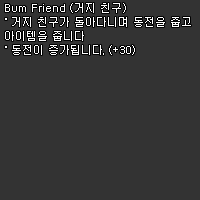
<style>
.page{position:relative;width:200px;height:200px;background:#333333}
.page>*{position:absolute;margin:0}
.t1{font:11px/14px "Dotum";color:#ffffff}
</style>
<div class="page">
<p class="t1" style="left:5px;top:3px;width:186px;height:52px">Bum Friend (거지 친구)<br>˚ 거지 친구가 돌아다니며 동전을 줍고<br>아이템을 줍니다<br>˚ 동전이 증가됩니다. (+30)</p>
</div>
